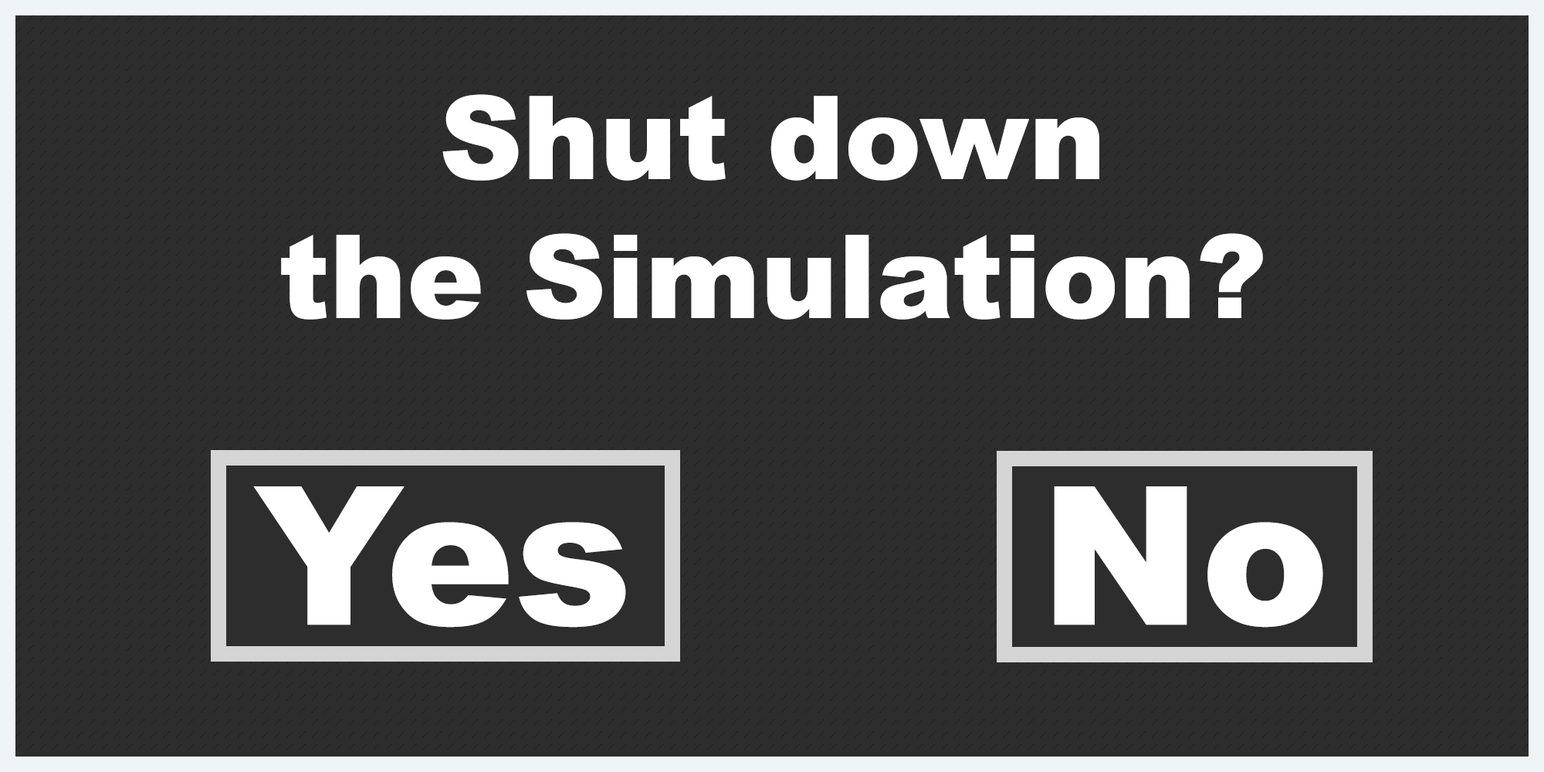
<style>
.page{position:relative;width:1544px;height:772px;background:#2d2d2d}
.page>*{position:absolute;margin:0}
.t1{font:115.8px "Arial-Black";color:#ffffff}
.t2{font:193px "Arial-Black";color:#ffffff}
</style>
<div class="page">
<p class="t1" style="left:281px;top:94px;width:982px;height:226px;text-align:center">Shut down<br>the Simulation?</p>
<p class="t2" style="left:253px;top:486px;width:373px;height:142px">Yes</p>
<p class="t2" style="left:1054px;top:486px;width:269px;height:142px">No</p>
</div>
